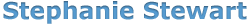
<style>
.page{position:relative;width:250px;height:25px;background:#ffffff}
.page>*{position:absolute;margin:0}
.t1{font:23.5px "Verdana-Bold";color:#569bd0}
</style>
<div class="page">
<p class="t1" style="left:3px;top:1px;width:244px;height:23px">Stephanie Stewart</p>
</div>
